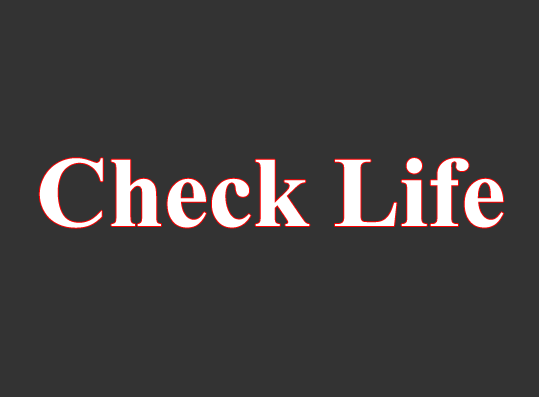
<style>
.page{position:relative;width:539px;height:397px;background:#333333}
.page>*{position:absolute;margin:0}
.t1{font:100px "TimesNewRomanPS-BoldMT";color:#ffffff}
</style>
<div class="page">
<p class="t1" style="left:39px;top:158px;width:465px;height:70px">Check Life</p>
</div>
